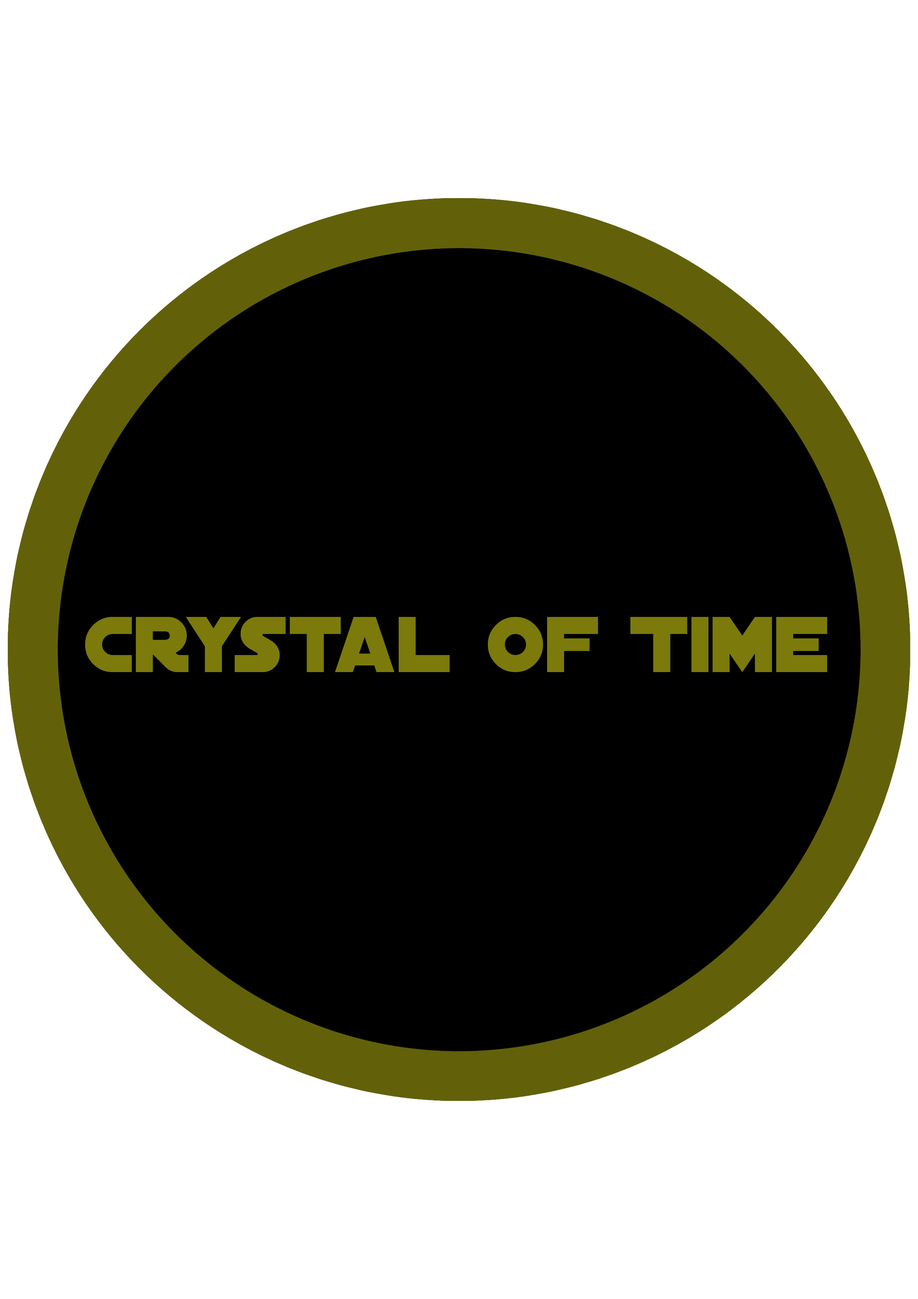
<style>
.page{position:relative;width:918px;height:1299px;background:#ffffff}
.page>*{position:absolute;margin:0}
.t1{font:20.4px "DistantGalaxy";color:#7b7a0b}
</style>
<div class="page">
<p class="t1" style="left:85px;top:617px;width:742px;height:55px">Crystal Of Time</p>
</div>
